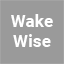
<style>
.page{position:relative;width:64px;height:64px;background:#9a9a9a}
.page>*{position:absolute;margin:0}
.t1{font:17.3px "Roboto-Bold";color:#ffffff}
</style>
<div class="page">
<p class="t1" style="left:11px;top:14px;width:42px;height:33px;text-align:center">Wake<br>Wise</p>
</div>
